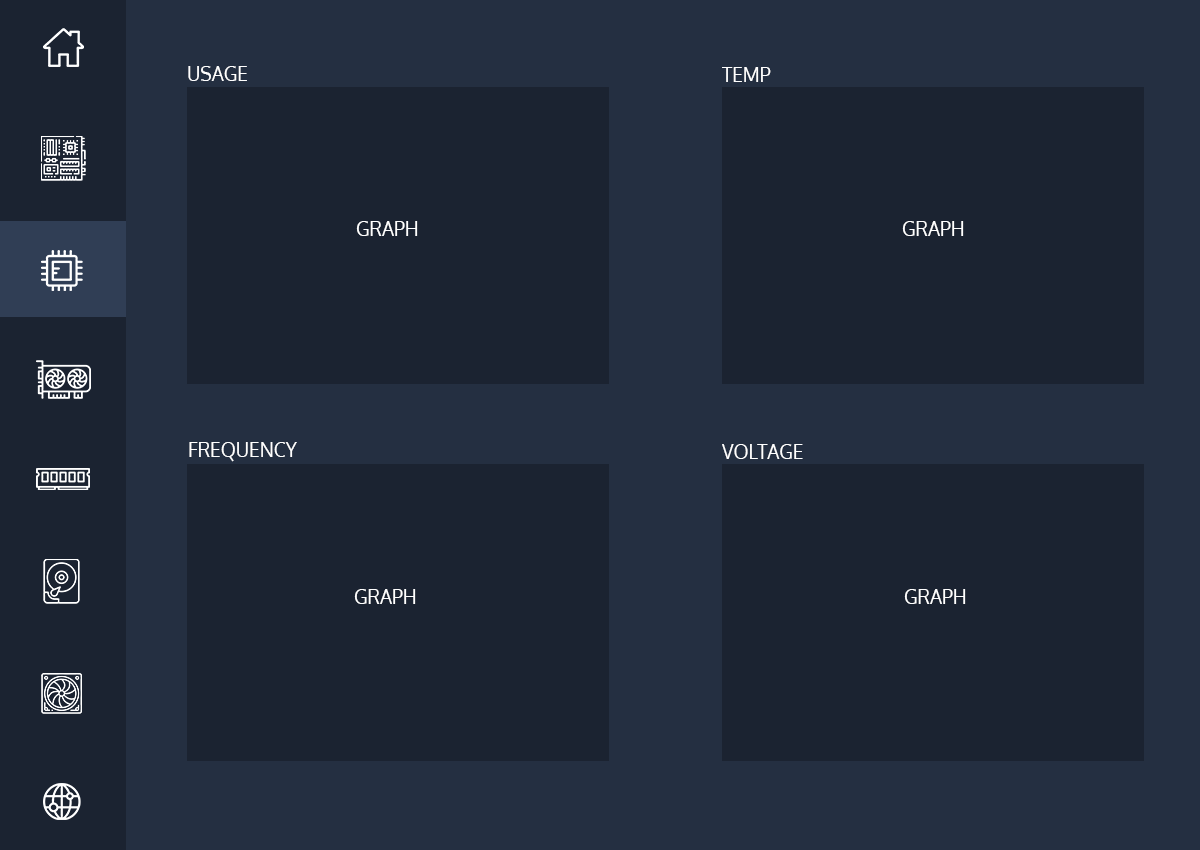
<style>
.page{position:relative;width:1200px;height:850px;background:#1b2331}
.page>*{position:absolute;margin:0}
.t1{font:19px "Oxygen-Regular";color:#ffffff}
</style>
<div class="page">
<p class="t1" style="left:188px;top:66px;width:59px;height:15px">USAGE</p>
<p class="t1" style="left:722px;top:67px;width:49px;height:15px">TEMP</p>
<p class="t1" style="left:356px;top:221px;width:62px;height:15px">GRAPH</p>
<p class="t1" style="left:902px;top:221px;width:62px;height:15px">GRAPH</p>
<p class="t1" style="left:189px;top:442px;width:108px;height:20px">FREQUENCY</p>
<p class="t1" style="left:722px;top:444px;width:81px;height:15px">VOLTAGE</p>
<p class="t1" style="left:354px;top:589px;width:62px;height:15px">GRAPH</p>
<p class="t1" style="left:904px;top:589px;width:62px;height:15px">GRAPH</p>
</div>
